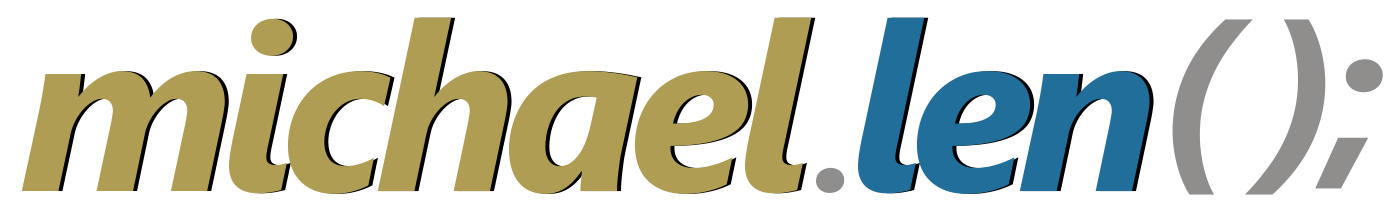
<style>
.page{position:relative;width:1400px;height:207px;background:#ffffff}
.page>*{position:absolute;margin:0}
.t1{font:234.3px "SegoeUI-BoldItalic";letter-spacing:-0.058em;color:#af9d53}
.t2{font:234.3px "SegoeUI-BoldItalic";letter-spacing:-0.058em;color:#226e9a}
.t3{font:205px "SegoeUI-BoldItalic";letter-spacing:-0.058em;color:#908d8d}
.t4{font:156.2px "SegoeUI-BoldItalic";letter-spacing:-0.058em;color:#908d8d}
</style>
<div class="page">
<p class="t1" style="left:21px;top:17px;width:791px;height:177px">michael</p>
<p class="t2" style="left:858px;top:17px;width:292px;height:177px">len</p>
<p class="t3" style="left:1172px;top:19px;width:211px;height:176px">( );</p>
<p class="t4" style="left:816px;top:167px;width:29px;height:26px">.</p>
</div>
